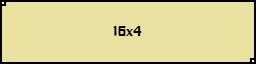
<style>
.page{position:relative;width:256px;height:64px;background:#e8e1a2}
.page>*{position:absolute;margin:0}
.t1{font:16px "MTOChaney";color:#000000}
</style>
<div class="page">
<p class="t1" style="left:113px;top:26px;width:29px;height:10px">16x4</p>
</div>
